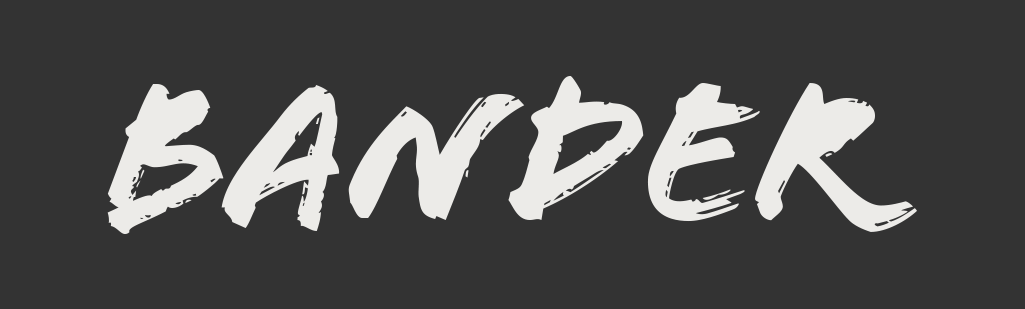
<style>
.page{position:relative;width:1025px;height:309px;background:#333333}
.page>*{position:absolute;margin:0}
.t1{font:208.3px "FloodStd";color:#ecebe8}
</style>
<div class="page">
<p class="t1" style="left:107px;top:76px;width:810px;height:158px">BANDER</p>
</div>
